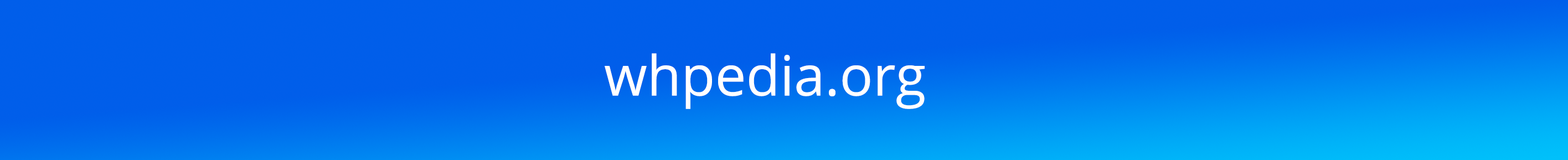
<style>
.page{position:relative;width:1568px;height:160px;background:#015eea}
.page>*{position:absolute;margin:0}
.t1{font:55.4px "OpenSans";color:#ffffff}
</style>
<div class="page">
<p class="t1" style="left:605px;top:53px;width:320px;height:56px">whpedia.org</p>
</div>
